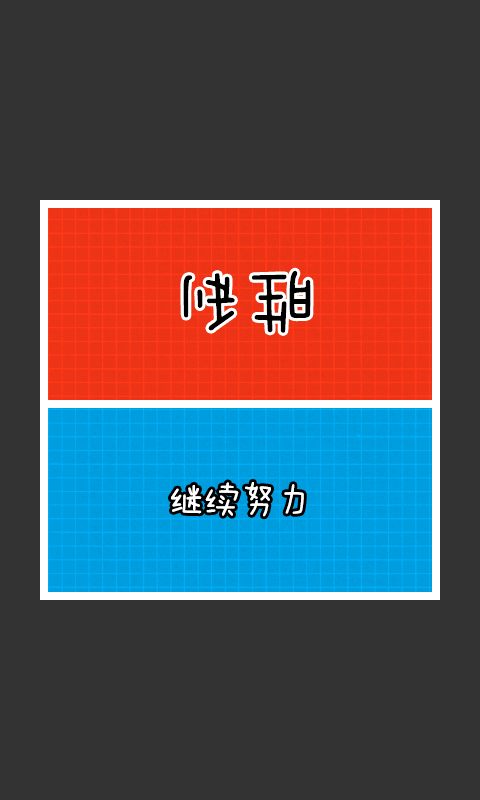
<style>
.page{position:relative;width:480px;height:800px;background:#333333}
.page>*{position:absolute;margin:0}
.t1{font:72px "FZMWJW--GB1-0";color:#000000}
.t2{font:36px "FZMWJW--GB1-0";color:#ffffff}
</style>
<div class="page">
<p class="t1" style="left:183px;top:270px;width:128px;height:63px;rotate:180deg">胜利</p>
<p class="t2" style="left:171px;top:482px;width:133px;height:35px">继续努力</p>
</div>
